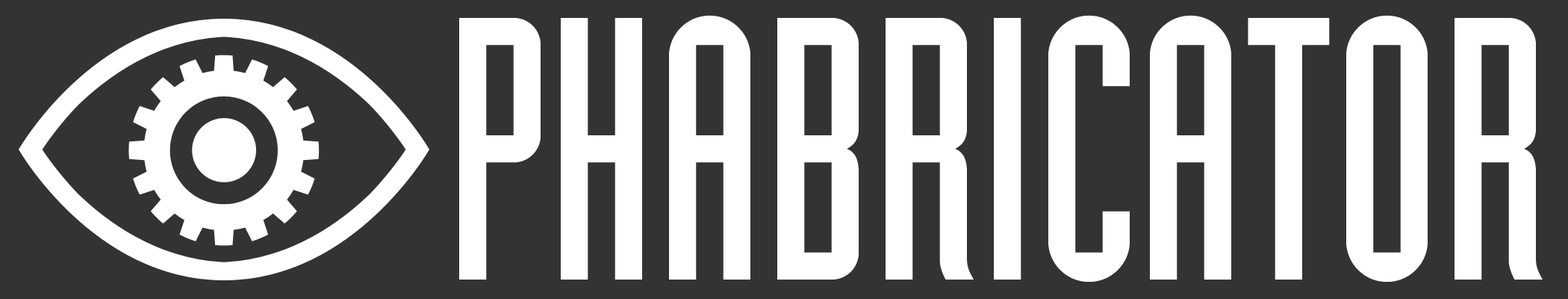
<style>
.page{position:relative;width:1568px;height:299px;background:#333333}
.page>*{position:absolute;margin:0}
.t1{font:365.9px "IndustriaLTStd-Solid";color:#ffffff}
</style>
<div class="page">
<p class="t1" style="left:459px;top:15px;width:1084px;height:266px">PHABRICATOR</p>
</div>
